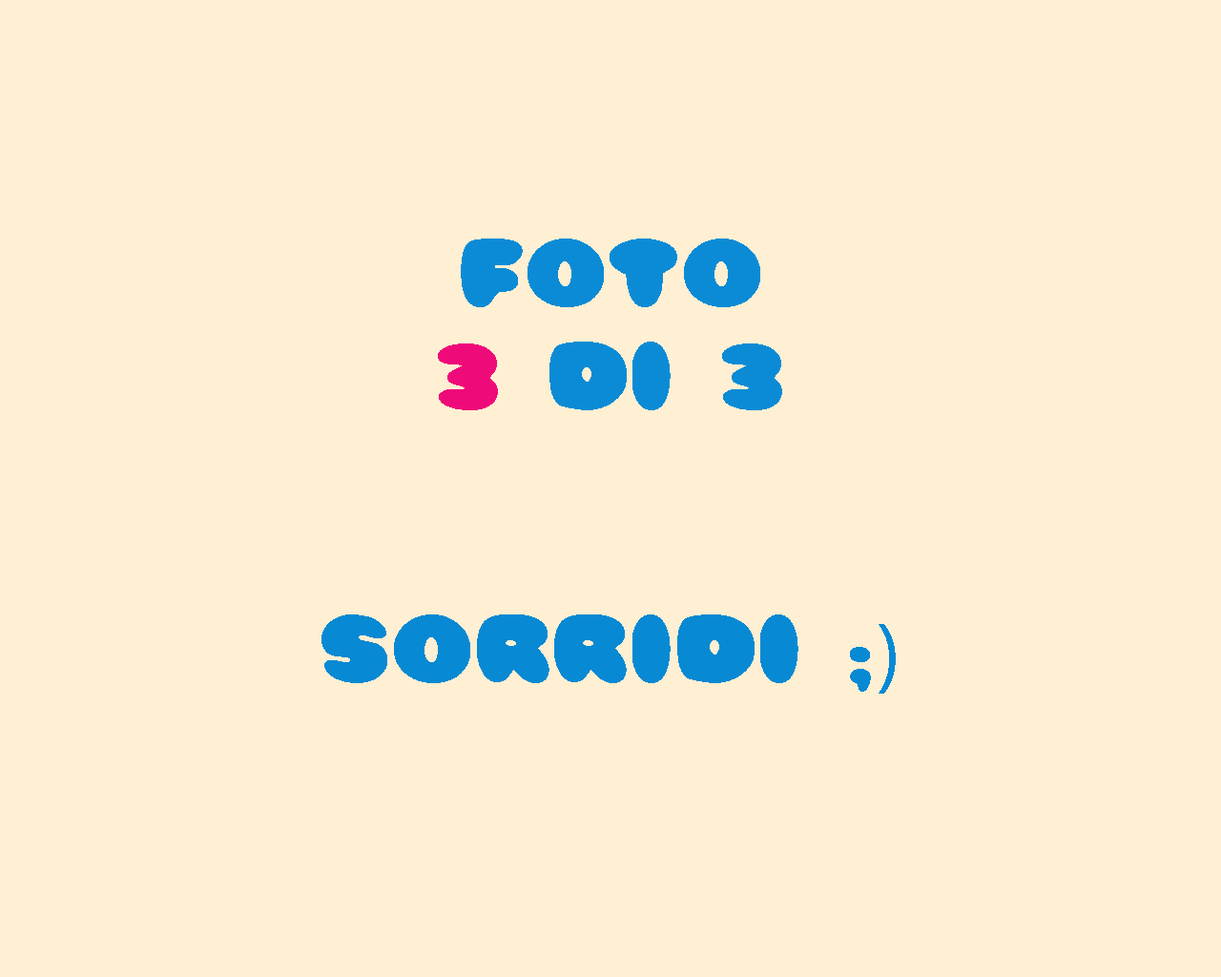
<style>
.page{position:relative;width:1221px;height:977px;background:#ffefd3}
.page>*{position:absolute;margin:0}
.t1{font:85.8px "Pleasantly-Plump";letter-spacing:0.025em;color:#0b8bd5}
.t2{font:85.8px "Pleasantly-Plump";letter-spacing:0.025em;color:#ef0a79}
.t3{font:85.8px "Pleasantly-Plump";letter-spacing:0.025em;color:#0889d3}
.t4{font:85.8px "MyriadPro-Regular";letter-spacing:0.025em;color:#0889d3}
</style>
<div class="page">
<p class="t1" style="left:438px;top:238px;width:344px;height:172px;text-align:center">Foto<br><span class="t2">3</span> di 3</p>
<p class="t3" style="left:321px;top:614px;width:575px;height:79px">Sorridi ;<span class="t4">)</span></p>
</div>
